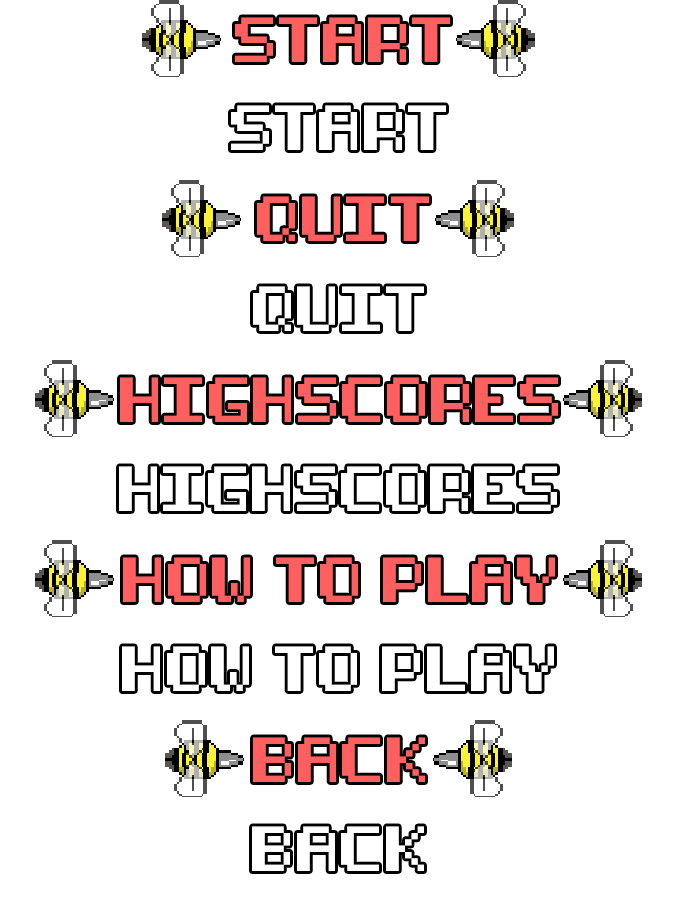
<style>
.page{position:relative;width:676px;height:920px;background:#ffffff}
.page>*{position:absolute;margin:0}
.t1{font:38.1px "8-bit-pusab";color:#ff5f5f}
.t2{font:38.1px "8-bit-pusab";color:#ffffff}
</style>
<div class="page">
<p class="t1" style="left:235px;top:17px;width:215px;height:45px">START</p>
<p class="t2" style="left:231px;top:105px;width:215px;height:45px">START</p>
<p class="t1" style="left:257px;top:196px;width:172px;height:45px">QUIT</p>
<p class="t2" style="left:253px;top:286px;width:171px;height:45px">QUIT</p>
<p class="t1" style="left:120px;top:377px;width:438px;height:45px">HIGHSCORES</p>
<p class="t2" style="left:119px;top:466px;width:438px;height:45px">HIGHSCORES</p>
<p class="t1" style="left:123px;top:557px;width:432px;height:45px">HOW TO PLAY</p>
<p class="t2" style="left:122px;top:646px;width:432px;height:45px">HOW TO PLAY</p>
<p class="t1" style="left:253px;top:737px;width:172px;height:45px">BACK</p>
<p class="t2" style="left:252px;top:826px;width:172px;height:45px">BACK</p>
</div>
